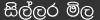
<style>
.page{position:relative;width:100px;height:20px;background:#333333}
.page>*{position:absolute;margin:0}
.t1{font:20.8px "FMMalithix";color:#ffffff}
</style>
<div class="page">
<p class="t1" style="left:4px;top:1px;width:90px;height:19px">is,a,r ñ,</p>
</div>
